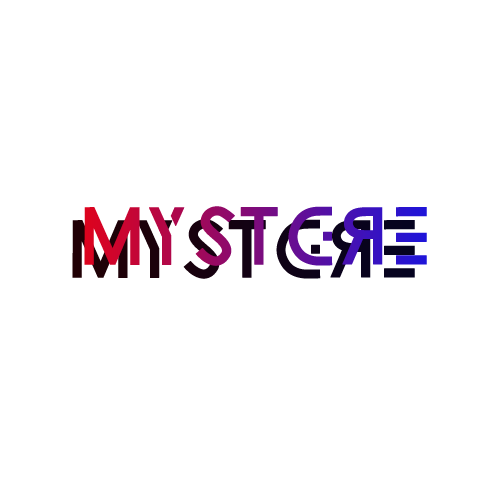
<style>
.page{position:relative;width:500px;height:500px;background:#ffffff}
.page>*{position:absolute;margin:0}
.t1{font:70.8px "FoundationLogo";letter-spacing:-0.25em;font-weight:bold}
.t2{font:70.8px "FoundationLogo";letter-spacing:-0.25em;color:#170218;font-weight:bold}
</style>
<div class="page">
<p class="t1" style="left:84px;top:206px;width:343px;height:60px">MystEre</p>
<p class="t2" style="left:72px;top:219px;width:343px;height:60px">MystEre</p>
</div>
